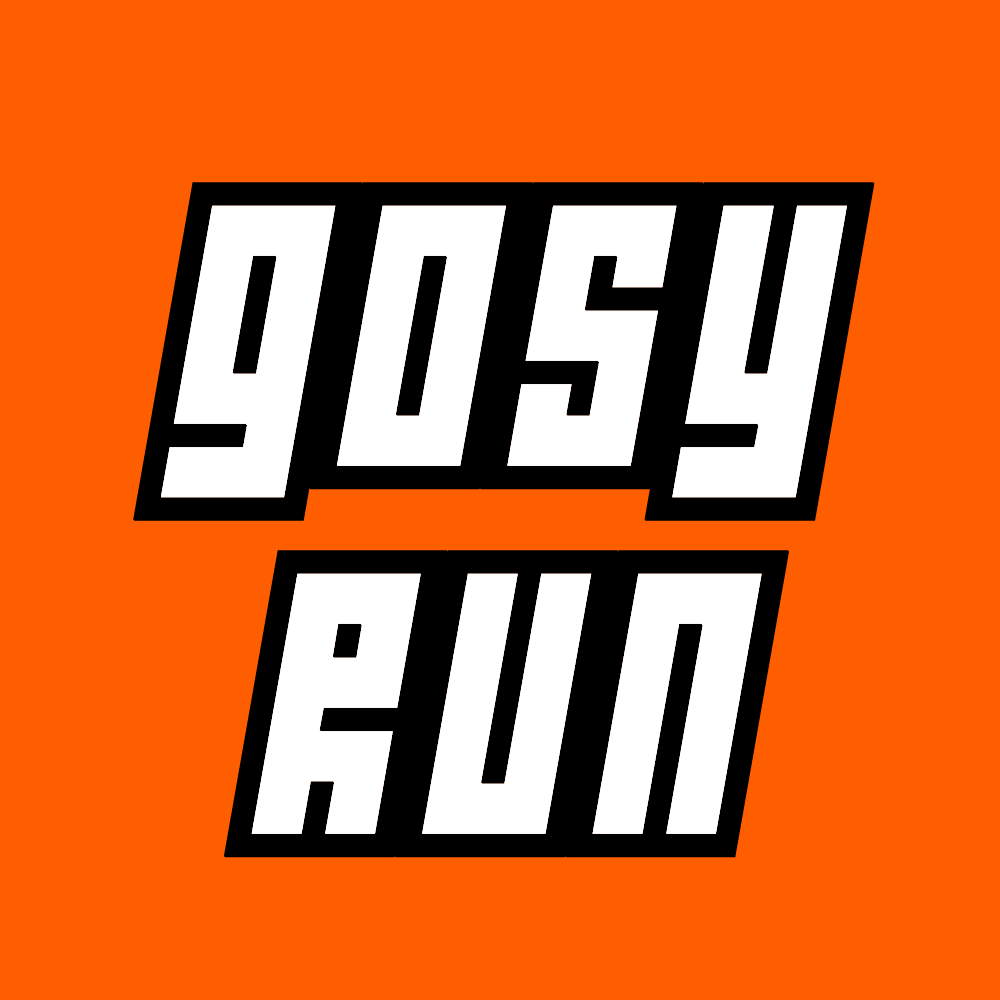
<style>
.page{position:relative;width:1000px;height:1000px;background:#ff5e00}
.page>*{position:absolute;margin:0}
.t1{font:350px/368px "Wideawake";letter-spacing:0.04em;color:#000000;font-weight:bold}
</style>
<div class="page">
<p class="t1" style="left:133px;top:182px;width:742px;height:676px;text-align:center">gosy<br>run</p>
</div>
